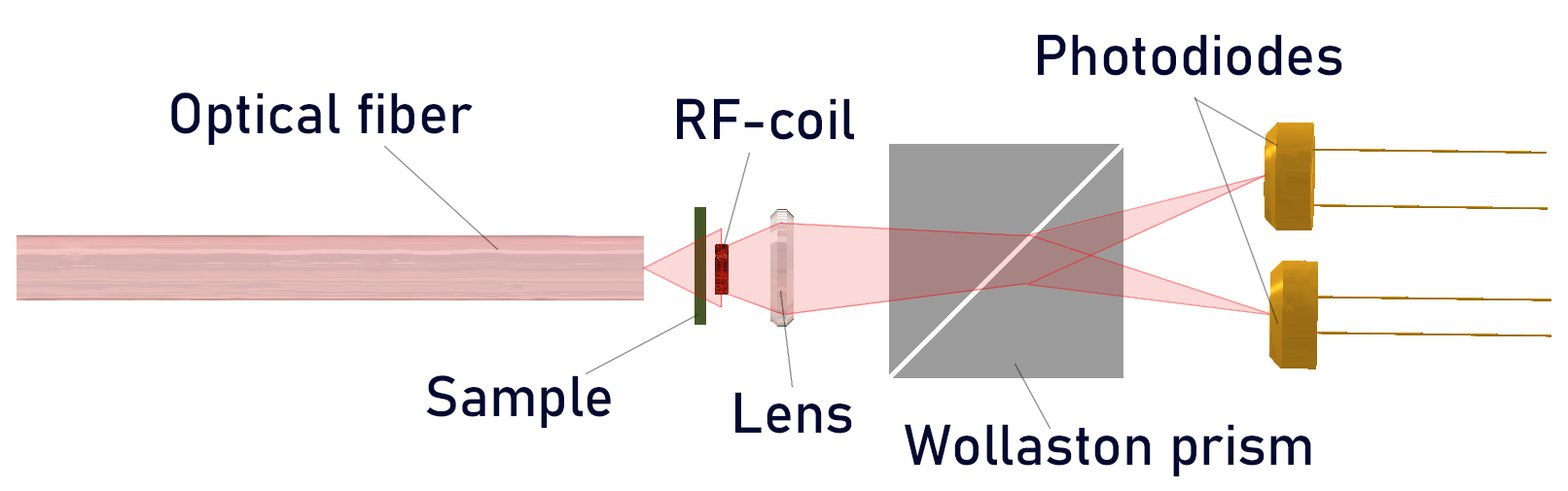
<style>
.page{position:relative;width:1568px;height:491px;background:#ffffff}
.page>*{position:absolute;margin:0}
.t1{font:56.8px "Bahnschrift";letter-spacing:-0.005em;color:#000931}
</style>
<div class="page">
<p class="t1" style="left:1038px;top:34px;width:304px;height:42px">Photodiodes</p>
<p class="t1" style="left:171px;top:92px;width:302px;height:53px">Optical fiber</p>
<p class="t1" style="left:677px;top:98px;width:177px;height:42px">RF-coil</p>
<p class="t1" style="left:426px;top:375px;width:185px;height:53px">Sample</p>
<p class="t1" style="left:735px;top:392px;width:117px;height:42px">Lens</p>
<p class="t1" style="left:905px;top:424px;width:406px;height:53px">Wollaston prism</p>
</div>
